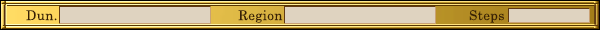
<style>
.page{position:relative;width:600px;height:30px;background:#dfd3c0}
.page>*{position:absolute;margin:0}
.t1{font:13.3px "CenturySchoolbook";letter-spacing:0.025em;color:#382005}
</style>
<div class="page">
<p class="t1" style="left:26px;top:10px;width:31px;height:11px">Dun.</p>
<p class="t1" style="left:238px;top:10px;width:45px;height:13px">Region</p>
<p class="t1" style="left:469px;top:10px;width:35px;height:13px">Steps</p>
</div>
